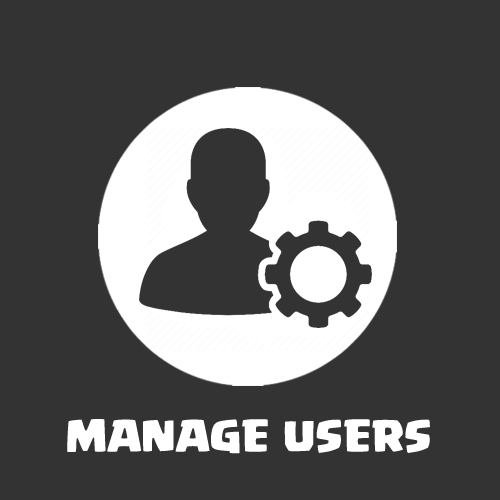
<style>
.page{position:relative;width:500px;height:500px;background:#333333}
.page>*{position:absolute;margin:0}
.t1{font:33px "Supercell-Magic";color:#ffffff;text-transform:uppercase}
</style>
<div class="page">
<p class="t1" style="left:67px;top:419px;width:363px;height:35px">Manage Users</p>
</div>
